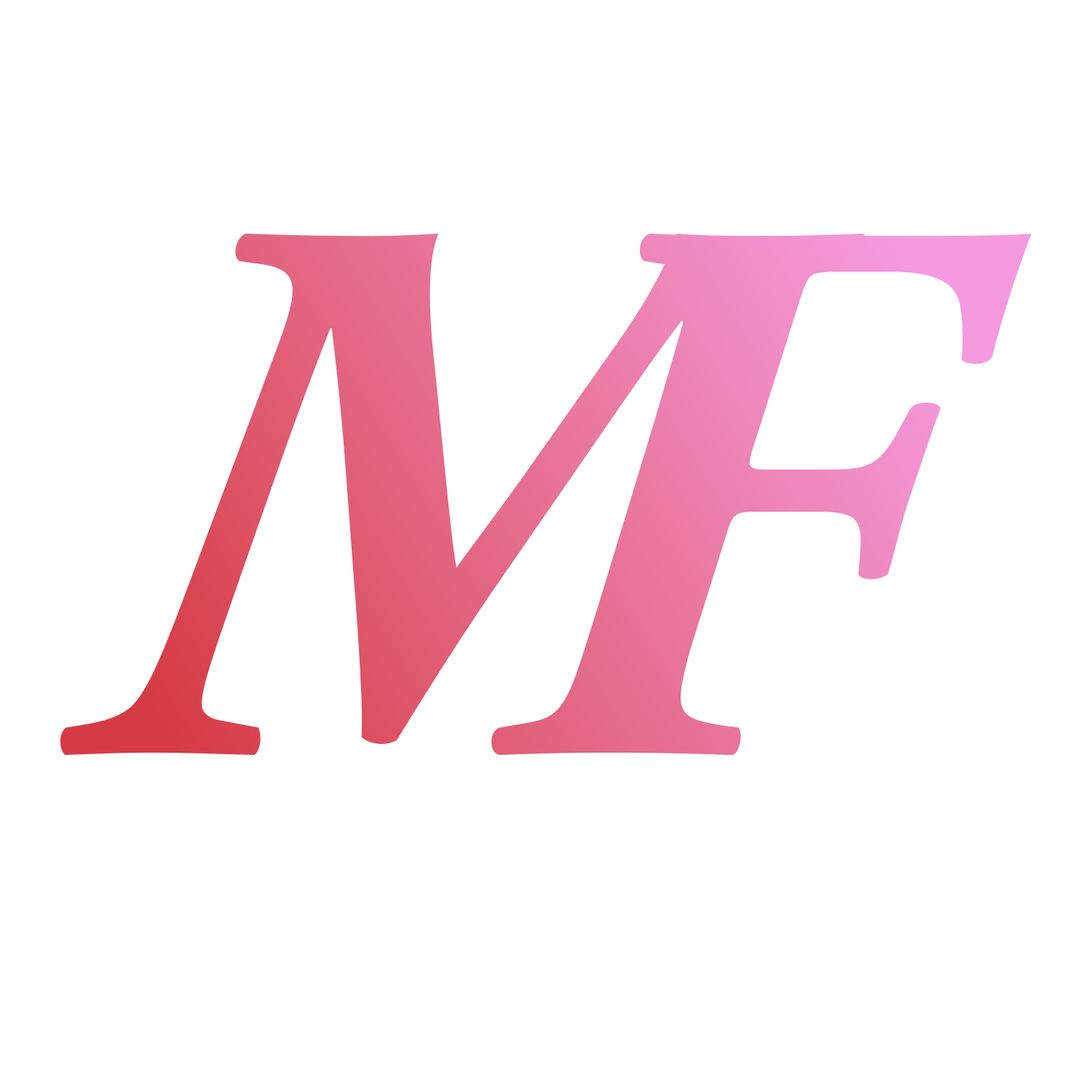
<style>
.page{position:relative;width:1092px;height:1092px;background:#ffffff}
.page>*{position:absolute;margin:0}
.t1{font:782.9px "AGaramondPro-BoldItalic";letter-spacing:-0.3em}
</style>
<div class="page">
<p class="t1" style="left:60px;top:234px;width:972px;height:521px">M F</p>
</div>
